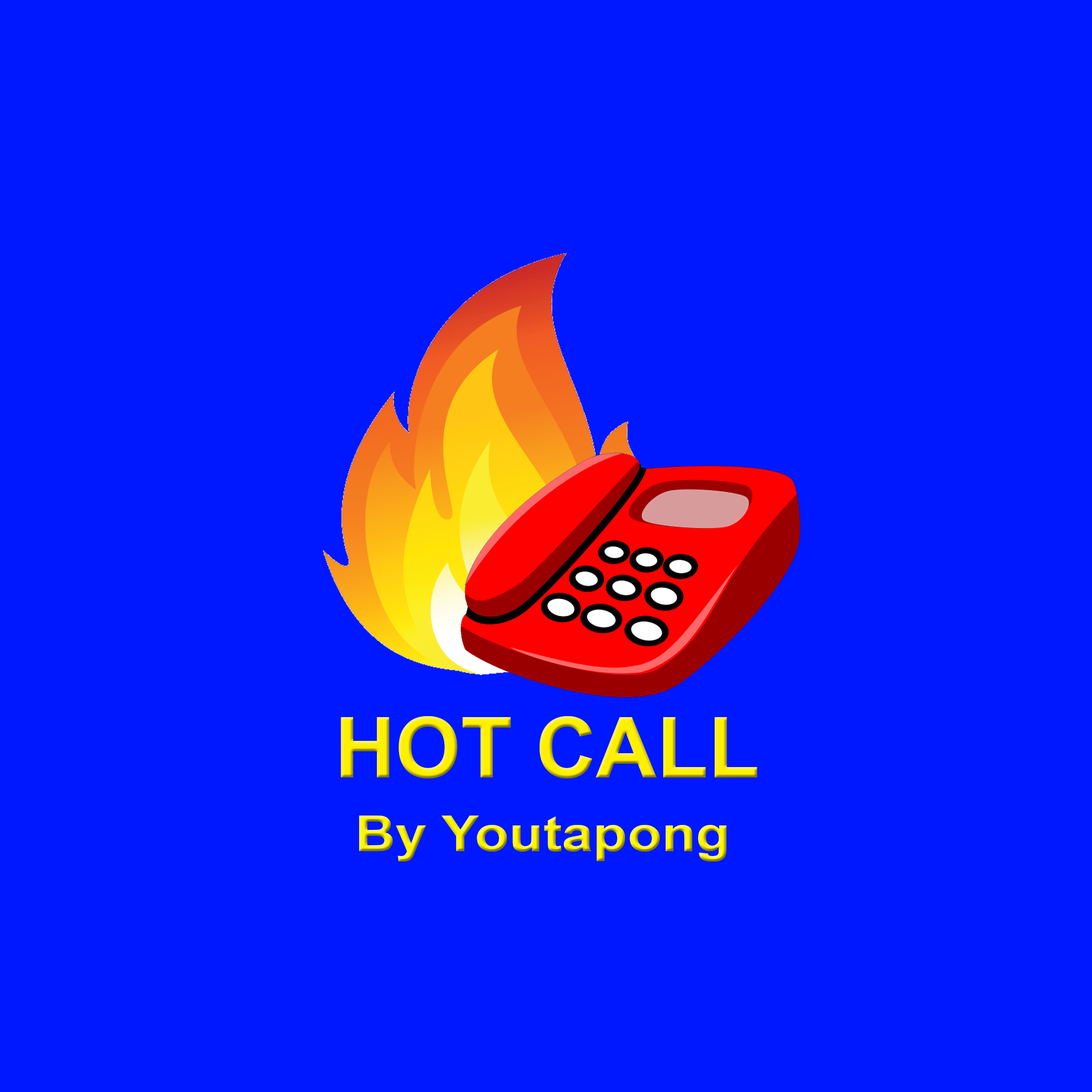
<style>
.page{position:relative;width:1092px;height:1092px;background:#0018ff}
.page>*{position:absolute;margin:0}
.t1{font:84.1px "Arial-BoldMT"}
.t2{font:49.5px "Arial-BoldMT";scale:1.13 1}
</style>
<div class="page">
<p class="t1" style="left:341px;top:716px;width:416px;height:62px">HOT CALL</p>
<p class="t2" style="left:359px;top:816px;width:368px;height:46px">By Youtapong</p>
</div>
